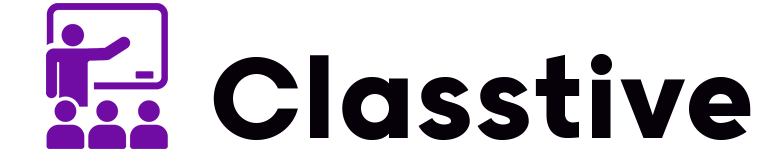
<style>
.page{position:relative;width:780px;height:151px;background:#ffffff}
.page>*{position:absolute;margin:0}
.t1{font:138px "FONTSPRINGDEMO-GroldBoldRegular";color:#060009}
</style>
<div class="page">
<p class="t1" style="left:213px;top:54px;width:538px;height:86px">Classtive</p>
</div>
